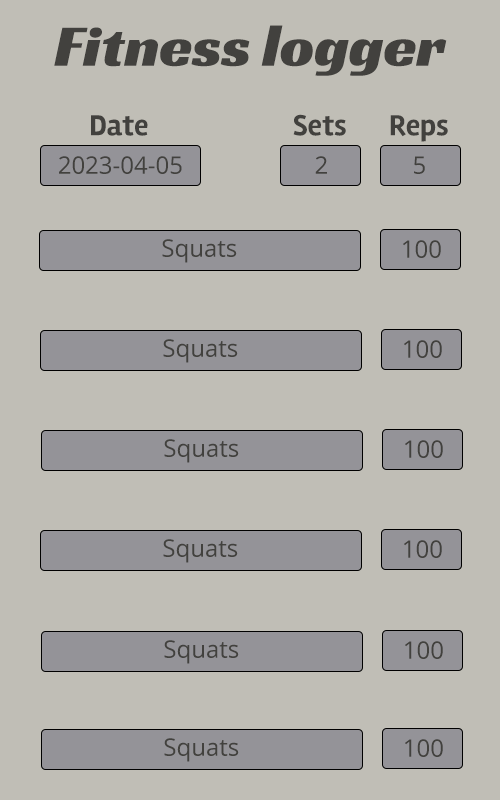
<style>
.page{position:relative;width:500px;height:800px;background:#c0beb6}
.page>*{position:absolute;margin:0}
.t1{font:60px "RacingSansOne-Regular";color:#42413e}
.t2{font:30px "Rambla-Bold";color:#42413e}
.t3{font:24px "OpenSans";color:#42413e}
</style>
<div class="page">
<p class="t1" style="left:54px;top:25px;width:393px;height:51px">Fitness logger</p>
<p class="t2" style="left:91px;top:115px;width:57px;height:21px">Date</p>
<p class="t2" style="left:293px;top:114px;width:53px;height:22px">Sets</p>
<p class="t2" style="left:390px;top:115px;width:58px;height:27px">Reps</p>
<p class="t3" style="left:59px;top:156px;width:123px;height:18px">2023-04-05</p>
<p class="t3" style="left:315px;top:156px;width:12px;height:18px">2</p>
<p class="t3" style="left:414px;top:156px;width:11px;height:18px">5</p>
<p class="t3" style="left:162px;top:239px;width:75px;height:24px">Squats</p>
<p class="t3" style="left:403px;top:240px;width:38px;height:18px">100</p>
<p class="t3" style="left:163px;top:339px;width:75px;height:24px">Squats</p>
<p class="t3" style="left:404px;top:340px;width:38px;height:18px">100</p>
<p class="t3" style="left:164px;top:439px;width:75px;height:24px">Squats</p>
<p class="t3" style="left:405px;top:440px;width:38px;height:18px">100</p>
<p class="t3" style="left:163px;top:539px;width:75px;height:24px">Squats</p>
<p class="t3" style="left:404px;top:540px;width:38px;height:18px">100</p>
<p class="t3" style="left:164px;top:640px;width:75px;height:24px">Squats</p>
<p class="t3" style="left:405px;top:641px;width:38px;height:18px">100</p>
<p class="t3" style="left:164px;top:738px;width:75px;height:24px">Squats</p>
<p class="t3" style="left:405px;top:739px;width:38px;height:18px">100</p>
</div>
